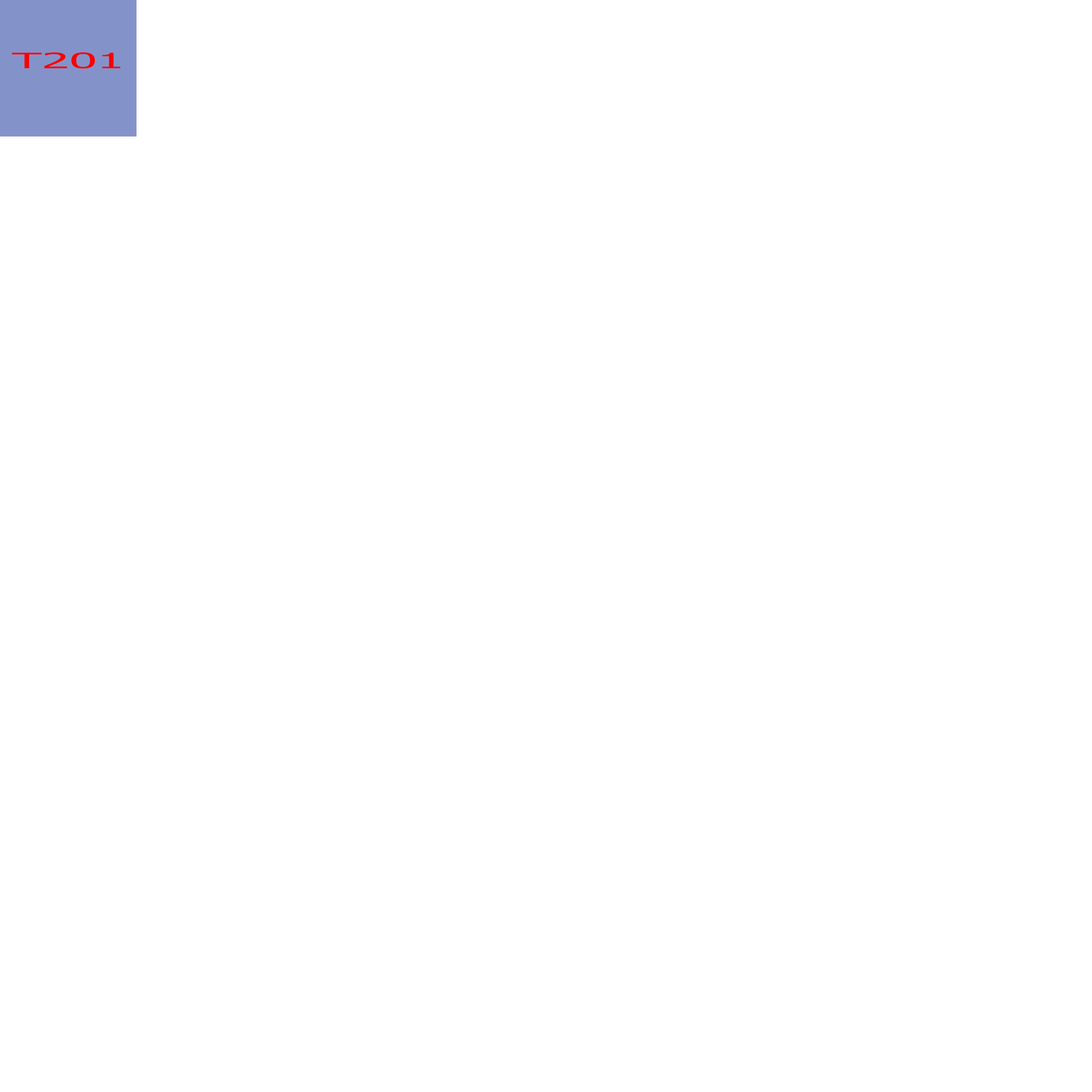
<style>
.page{position:relative;width:1092px;height:1092px;background:#ffffff}
.page>*{position:absolute;margin:0}
.t1{font:21.5px "Tahoma";color:#f60303;scale:2.35 1}
</style>
<div class="page">
<p class="t1" style="left:12px;top:52px;width:108px;height:17px">T201</p>
</div>
